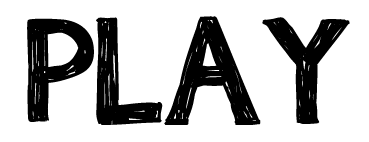
<style>
.page{position:relative;width:369px;height:142px;background:#ffffff}
.page>*{position:absolute;margin:0}
.t1{font:150px "appleberry";color:#000000}
</style>
<div class="page">
<p class="t1" style="left:27px;top:16px;width:323px;height:109px">PLAY</p>
</div>
